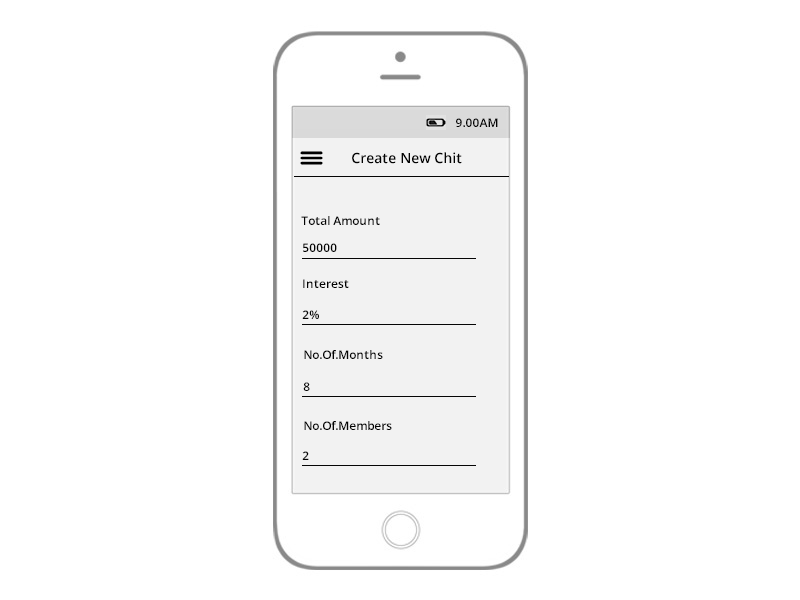
<style>
.page{position:relative;width:800px;height:600px;background:#ffffff}
.page>*{position:absolute;margin:0}
.t1{font:12px "OpenSans-Semibold";color:#030303}
.t2{font:14px "OpenSans-Semibold";color:#030303}
</style>
<div class="page">
<p class="t1" style="left:456px;top:118px;width:42px;height:9px">9.00AM</p>
<p class="t2" style="left:352px;top:152px;width:110px;height:12px">Create New Chit</p>
<p class="t1" style="left:301px;top:216px;width:79px;height:9px">Total Amount</p>
<p class="t1" style="left:303px;top:243px;width:34px;height:9px">50000</p>
<p class="t1" style="left:303px;top:279px;width:46px;height:9px">Interest</p>
<p class="t1" style="left:302px;top:310px;width:17px;height:9px">2%</p>
<p class="t1" style="left:304px;top:350px;width:79px;height:9px">No.Of.Months</p>
<p class="t1" style="left:303px;top:382px;width:7px;height:9px">8</p>
<p class="t1" style="left:304px;top:421px;width:88px;height:9px">No.Of.Members</p>
<p class="t1" style="left:302px;top:451px;width:7px;height:9px">2</p>
</div>
